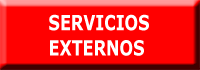
<style>
.page{position:relative;width:200px;height:70px;background:#ff0000}
.page>*{position:absolute;margin:0}
.t1{font:21px "Verdana-Bold";color:#ffffff;scale:0.76 1}
</style>
<div class="page">
<p class="t1" style="left:49px;top:14px;width:100px;height:42px">SERVICIOS<br>    EXTERNOS</p>
</div>
